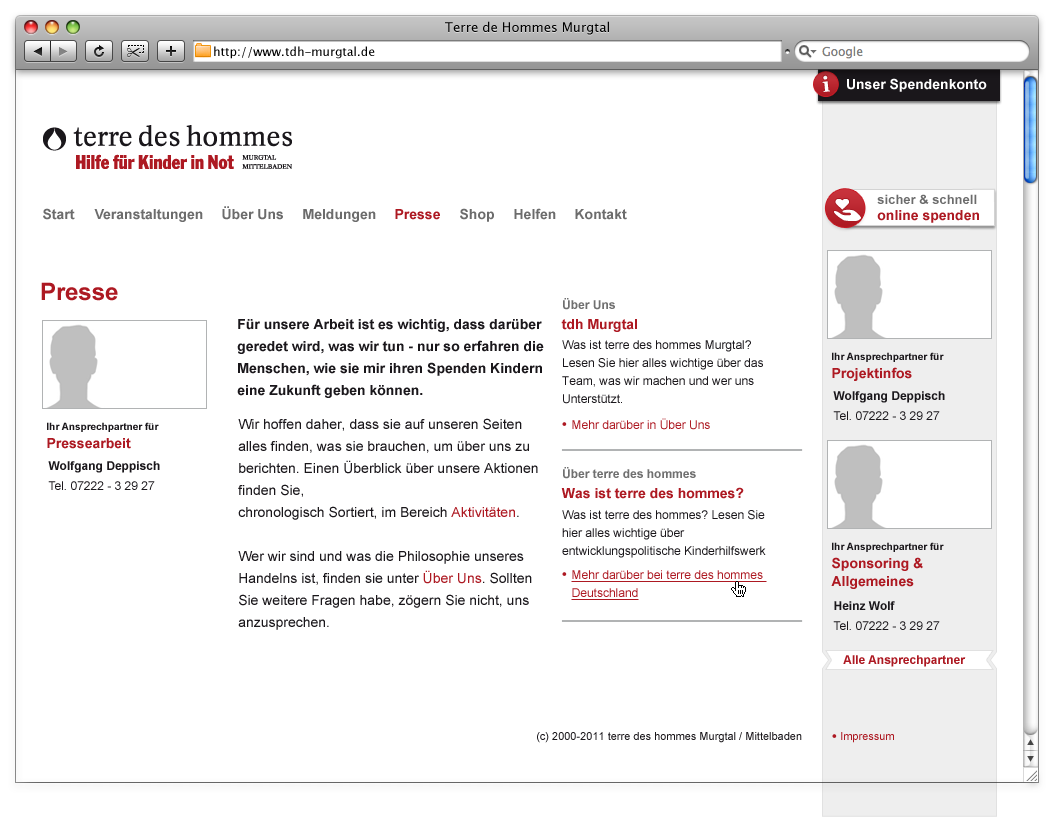
<style>
.page{position:relative;width:1054px;height:817px;background:#ffffff}
.page>*{position:absolute;margin:0}
.t1{font:13px "LucidaGrande";color:#000000}
.t2{font:12px "LucidaGrande";color:#000000}
.t3{font:21px "Georgia-Bold";color:#ffffff}
.t4{font:14px "Arial-BoldMT";color:#ffffff}
.t5{font:13px/16px "Arial-BoldMT";color:#6c6c6c}
.t6{font:14px/16px "Arial-BoldMT";color:#ad1922}
.t7{font:14px "Arial-BoldMT";color:#6c6c6c}
.t8{font:14px "Arial-BoldMT";color:#ad1922}
.t9{font:24px "Arial-BoldMT";color:#ad1922}
.t10{font:12px "Arial-BoldMT";color:#707070}
.t11{font:14px/22px "Arial-BoldMT";color:#1a171b}
.t12{font:12px/18px "ArialMT";color:#1a171b}
.t13{font:10px/18px "Arial-BoldMT";color:#1a171b}
.t14{font:14px/18px "Arial-BoldMT";color:#ad1922}
.t15{font:12px "Arial-BoldMT";color:#1a171b}
.t16{font:12px "ArialMT";color:#1a171b}
.t17{font:14px/22px "ArialMT";color:#1a171b}
.t18{font:14px/22px "ArialMT";color:#ad1922}
.t19{font:12px "ArialMT";color:#ad1922}
.t20{font:12px/18px "ArialMT";color:#ad1922;text-decoration:underline}
.t21{font:12px "Arial-BoldMT";color:#ad1922}
.t22{font:11px "ArialMT";color:#1a171b}
.t23{font:11px "ArialMT";color:#ad1922}
</style>
<div class="page">
<p class="t1" style="left:445px;top:21px;width:164px;height:14px">Terre de Hommes Murgtal</p>
<p class="t2" style="left:214px;top:46px;width:161px;height:13px">http://www.tdh-murgtal.de</p>
<p class="t3" style="left:822px;top:75px;width:8px;height:17px;rotate:-5deg">i</p>
<p class="t4" style="left:847px;top:78px;width:140px;height:14px">Unser Spendenkonto</p>
<p class="t5" style="left:877px;top:194px;width:102px;height:29px">sicher &amp; schnell <br><span class="t6">online spenden</span></p>
<p class="t7" style="left:43px;top:208px;width:32px;height:12px">Start</p>
<p class="t7" style="left:94px;top:209px;width:109px;height:13px">Veranstaltungen</p>
<p class="t7" style="left:222px;top:206px;width:61px;height:14px">Über Uns</p>
<p class="t7" style="left:303px;top:209px;width:73px;height:13px">Meldungen</p>
<p class="t8" style="left:395px;top:209px;width:45px;height:11px">Presse</p>
<p class="t7" style="left:460px;top:208px;width:34px;height:14px">Shop</p>
<p class="t7" style="left:514px;top:208px;width:42px;height:12px">Helfen</p>
<p class="t7" style="left:575px;top:209px;width:52px;height:11px">Kontakt</p>
<p class="t9" style="left:41px;top:282px;width:77px;height:19px">Presse</p>
<p class="t10" style="left:563px;top:298px;width:52px;height:12px">Über Uns</p>
<p class="t11" style="left:237px;top:319px;width:307px;height:79px">Für unsere Arbeit ist es wichtig, dass darüber <br>geredet wird, was wir tun - nur so erfahren die <br>Menschen, wie sie mir ihren Spenden Kindern <br>eine Zukunft geben können.</p>
<p class="t8" style="left:561px;top:319px;width:76px;height:13px">tdh Murgtal</p>
<p class="t12" style="left:562px;top:340px;width:201px;height:64px">Was ist terre des hommes Murgtal?<br>Lesen Sie hier alles wichtige über das<br>Team, was wir machen und wer uns<br>Unterstützt.</p>
<p class="t13" style="left:832px;top:352px;width:112px;height:29px">Ihr Ansprechpartner für <br><span class="t14">Projektinfos</span></p>
<p class="t15" style="left:833px;top:391px;width:112px;height:12px">Wolfgang Deppisch</p>
<p class="t16" style="left:833px;top:411px;width:107px;height:9px">Tel. 07222 - 3 29 27</p>
<p class="t13" style="left:47px;top:422px;width:112px;height:27px">Ihr Ansprechpartner für <br><span class="t14">Pressearbeit</span></p>
<p class="t17" style="left:238px;top:418px;width:300px;height:212px">Wir hoffen daher, dass sie auf unseren Seiten alles finden, was sie brauchen, um über uns zu berichten. Einen Überblick über unsere Aktionen finden Sie,<br>chronologisch Sortiert, im Bereich <span class="t18">Aktivitäten</span>.<br><br>Wer wir sind und was die Philosophie unseres Handelns ist, finden sie unter <span class="t18">Über Uns</span>. Sollten Sie weitere Fragen habe, zögern Sie nicht, uns<br>anzusprechen.</p>
<p class="t19" style="left:572px;top:418px;width:138px;height:12px">Mehr darüber in Über Uns</p>
<p class="t15" style="left:48px;top:461px;width:112px;height:12px">Wolfgang Deppisch</p>
<p class="t10" style="left:563px;top:467px;width:133px;height:12px">Über terre des hommes</p>
<p class="t16" style="left:48px;top:481px;width:107px;height:9px">Tel. 07222 - 3 29 27</p>
<p class="t8" style="left:561px;top:487px;width:183px;height:12px">Was ist terre des hommes?</p>
<p class="t12" style="left:562px;top:510px;width:204px;height:48px">Was ist terre des hommes? Lesen Sie<br>hier alles wichtige über<br>entwicklungspolitische Kinderhilfswerk</p>
<p class="t14" style="left:831px;top:542px;width:113px;height:47px"><span class="t13">Ihr Ansprechpartner für <br></span>Sponsoring &amp; <br>Allgemeines</p>
<p class="t20" style="left:571px;top:570px;width:196px;height:30px">Mehr darüber bei terre des hommes <br>Deutschland</p>
<p class="t15" style="left:834px;top:601px;width:61px;height:9px">Heinz Wolf</p>
<p class="t16" style="left:833px;top:621px;width:107px;height:9px">Tel. 07222 - 3 29 27</p>
<p class="t21" style="left:843px;top:655px;width:123px;height:12px">Alle Ansprechpartner</p>
<p class="t22" style="left:537px;top:732px;width:265px;height:11px">(c) 2000-2011 terre des hommes Murgtal / Mittelbaden</p>
<p class="t23" style="left:841px;top:732px;width:53px;height:11px">Impressum</p>
</div>
